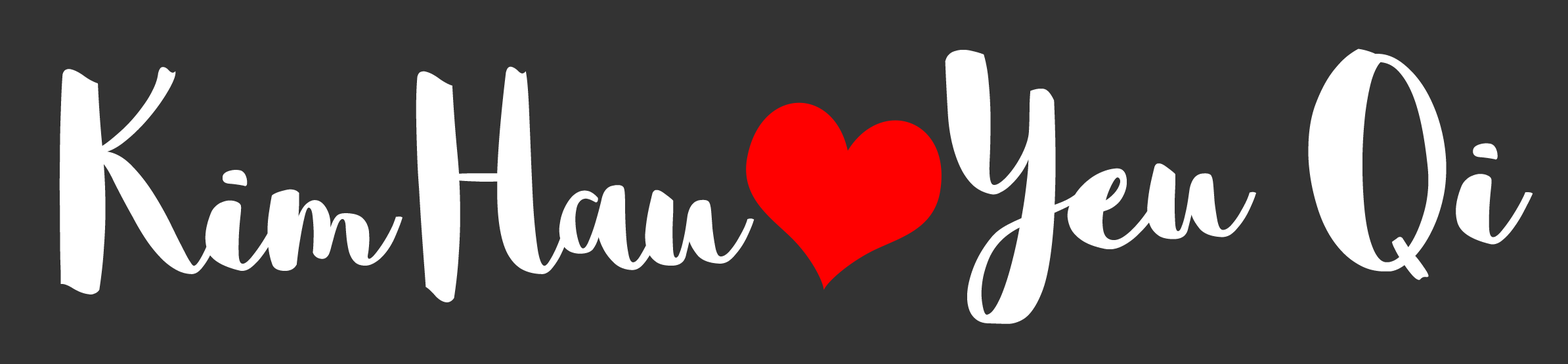
<style>
.page{position:relative;width:1568px;height:364px;background:#333333}
.page>*{position:absolute;margin:0}
.t1{font:298.8px "Sophia";letter-spacing:-0.01em;color:#ffffff}
</style>
<div class="page">
<p class="t1" style="left:945px;top:49px;width:588px;height:275px">Yeu Qi</p>
<p class="t1" style="left:59px;top:66px;width:695px;height:237px">KimHau Hau</p>
</div>
